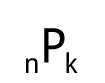
<style>
.page{position:relative;width:105px;height:83px;background:#ffffff}
.page>*{position:absolute;margin:0}
.t1{font:47.9px "DroidSans";color:#000000}
.t2{font:27.2px "DroidSans";color:#000000}
</style>
<div class="page">
<p class="t1" style="left:44px;top:28px;width:21px;height:35px">P</p>
<p class="t2" style="left:66px;top:52px;width:12px;height:21px">k</p>
<p class="t2" style="left:26px;top:58px;width:12px;height:15px">n</p>
</div>
